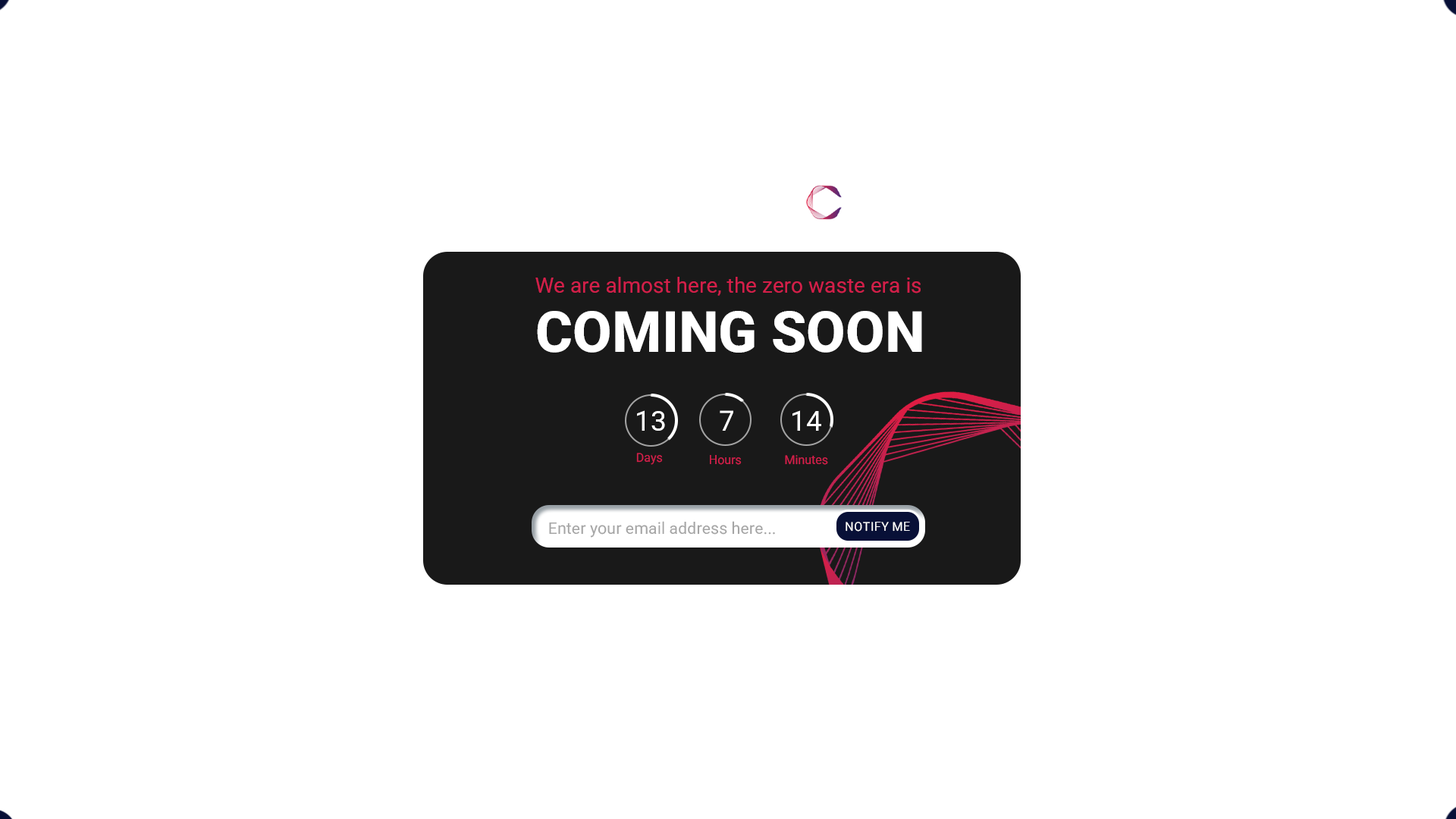
<style>
.page{position:relative;width:1456px;height:819px;background:#ffffff}
.page>*{position:absolute;margin:0}
.t1{font:21.2px "Roboto-Regular";color:#d31f49}
.t2{font:56.7px "Roboto-ExtraBold";color:#ffffff}
.t3{font:27.8px "Roboto-Regular";color:#ffffff}
.t4{font:12.1px "Roboto-Regular";color:#d21f49}
.t5{font:16.3px "Roboto-Regular";color:#a5a5a5}
.t6{font:12.1px "Roboto-Regular";color:#ffffff;text-transform:uppercase}
</style>
<div class="page">
<p class="t1" style="left:535px;top:277px;width:386px;height:19px">We are almost here, the zero waste era is</p>
<p class="t2" style="left:537px;top:311px;width:385px;height:42px">COMING SOON</p>
<p class="t3" style="left:637px;top:410px;width:28px;height:21px">13</p>
<p class="t3" style="left:720px;top:410px;width:13px;height:21px">7</p>
<p class="t3" style="left:792px;top:410px;width:29px;height:21px">14</p>
<p class="t4" style="left:636px;top:453px;width:27px;height:12px">Days</p>
<p class="t4" style="left:710px;top:455px;width:32px;height:10px">Hours</p>
<p class="t4" style="left:785px;top:455px;width:43px;height:10px">Minutes</p>
<p class="t5" style="left:549px;top:521px;width:226px;height:17px">Enter your email address here...</p>
<p class="t6" style="left:846px;top:522px;width:64px;height:10px">Notify Me</p>
</div>
